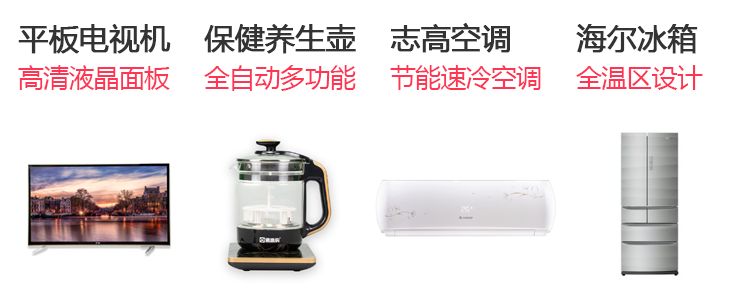
<style>
.page{position:relative;width:744px;height:300px;background:#ffffff}
.page>*{position:absolute;margin:0}
.t1{font:30px "MicrosoftYaHei";letter-spacing:-0.016em;color:#333333;text-transform:uppercase;font-weight:bold}
.t2{font:26px "MicrosoftYaHei";letter-spacing:-0.03em;color:#fe3653}
</style>
<div class="page">
<p class="t1" style="left:18px;top:24px;width:153px;height:30px">平板电视机</p>
<p class="t1" style="left:204px;top:24px;width:152px;height:30px">保健养生壶</p>
<p class="t1" style="left:391px;top:23px;width:119px;height:30px">志高空调</p>
<p class="t1" style="left:576px;top:24px;width:122px;height:30px">海尔冰箱</p>
<p class="t2" style="left:18px;top:65px;width:152px;height:25px">高清液晶面板</p>
<p class="t2" style="left:204px;top:65px;width:152px;height:26px">全自动多功能</p>
<p class="t2" style="left:390px;top:65px;width:151px;height:25px">节能速冷空调</p>
<p class="t2" style="left:576px;top:65px;width:127px;height:25px">全温区设计</p>
</div>
